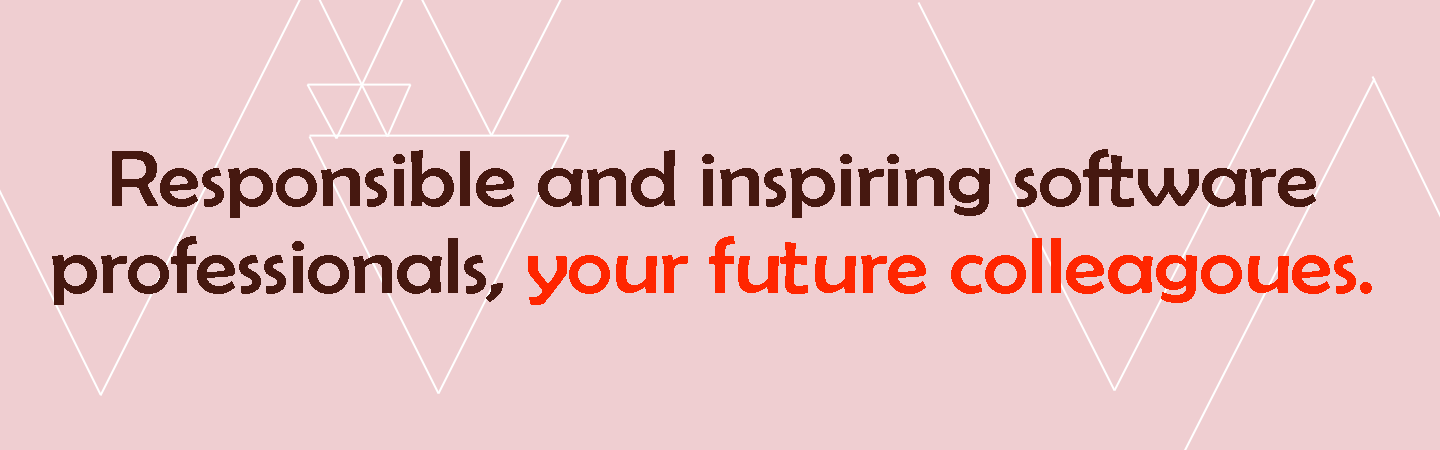
<style>
.page{position:relative;width:1440px;height:450px;background:#efced1}
.page>*{position:absolute;margin:0}
.t1{font:80px/86.6px "BerlinSansFB-Reg";letter-spacing:-0.01em;color:#461810;scale:1.1 1}
.t2{font:80px/86.6px "BerlinSansFB-Reg";letter-spacing:-0.01em;color:#ff2600;scale:1.1 1}
</style>
<div class="page">
<p class="t1" style="left:52px;top:149px;width:1320px;height:156px;text-align:center">Responsible and inspiring software<br>professionals, <span class="t2">your future colleagoues.</span></p>
</div>
